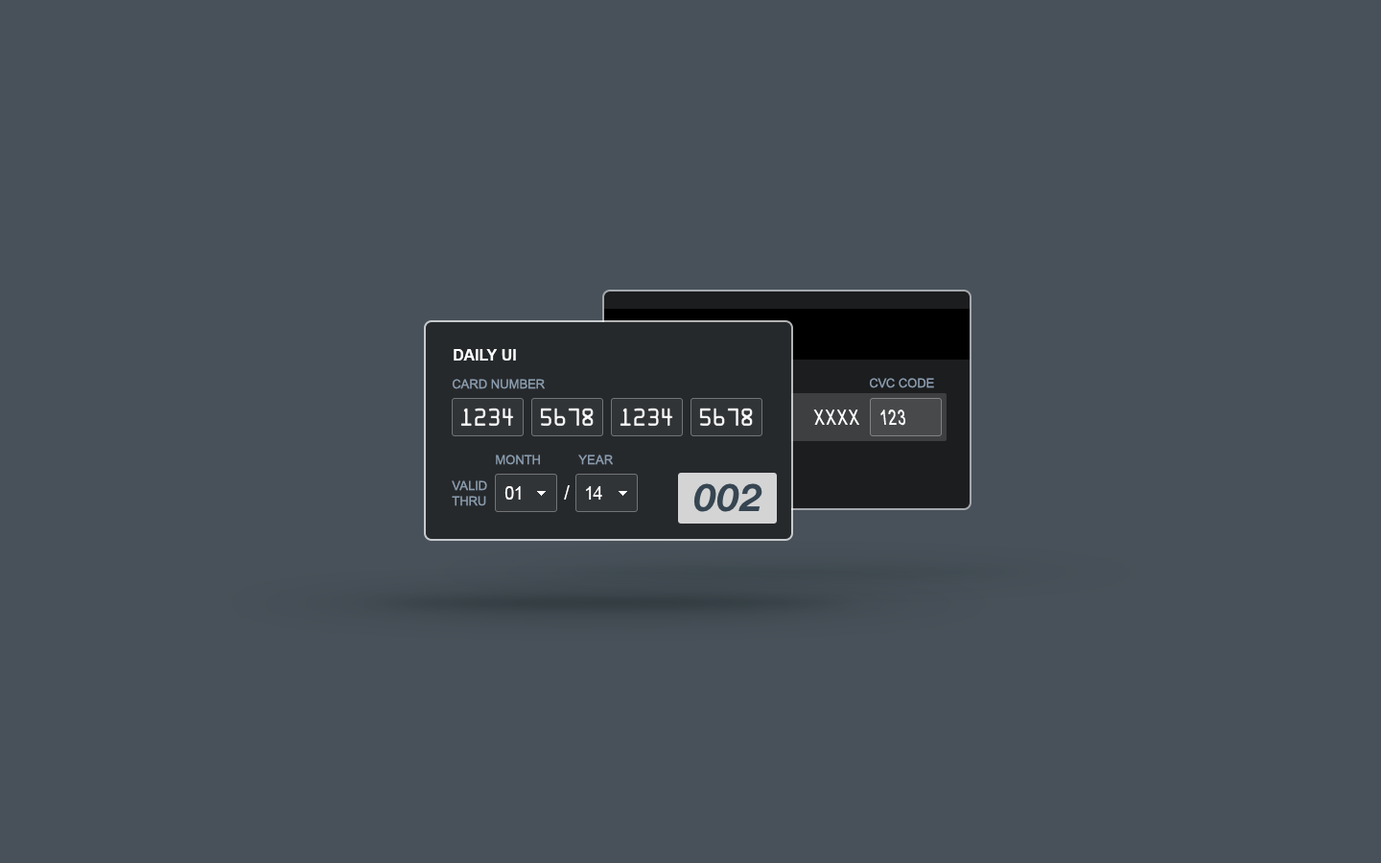
<style>
.page{position:relative;width:1381px;height:863px;background:#485159}
.page>*{position:absolute;margin:0}
.t1{font:15.3px "Arial-BoldMT";color:#ffffff;text-transform:uppercase}
.t2{font:12.5px "ArialMT";color:#8a9bad;text-transform:uppercase}
.t3{font:20.8px "ArialMT";letter-spacing:0.1em;color:#ffffff;text-transform:uppercase;scale:0.69 1}
.t4{font:20.8px "ArialMT";letter-spacing:0.1em;color:#ffffff;scale:0.69 1}
.t5{font:12.5px/15.3px "ArialMT";color:#8a9bad;text-transform:uppercase}
.t6{font:19.2px "ArialMT";color:#ffffff;text-transform:uppercase}
.t7{font:18.2px "ArialMT";color:#ffffff;text-transform:uppercase;scale:0.95 1}
</style>
<div class="page">
<p class="t1" style="left:454px;top:349px;width:62px;height:12px">Daily UI</p>
<p class="t2" style="left:869px;top:378px;width:65px;height:10px">СvС Code</p>
<p class="t2" style="left:452px;top:379px;width:93px;height:10px">Card number</p>
<p class="t3" style="left:813px;top:410px;width:46px;height:15px">xxxx</p>
<p class="t4" style="left:881px;top:410px;width:24px;height:16px">123</p>
<p class="t2" style="left:496px;top:455px;width:44px;height:10px">month</p>
<p class="t2" style="left:578px;top:455px;width:35px;height:10px">year</p>
<p class="t5" style="left:452px;top:481px;width:35px;height:25px">Valid<br>thru</p>
<p class="t6" style="left:564px;top:485px;width:6px;height:15px">/</p>
<p class="t7" style="left:505px;top:486px;width:16px;height:14px">01</p>
<p class="t7" style="left:586px;top:486px;width:16px;height:14px">14</p>
</div>
